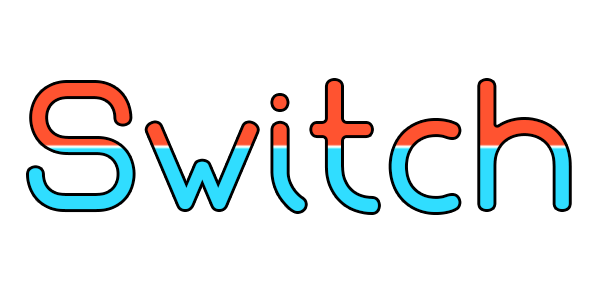
<style>
.page{position:relative;width:600px;height:300px;background:#ffffff}
.page>*{position:absolute;margin:0}
.t1{font:158.8px "Lachata"}
</style>
<div class="page">
<p class="t1" style="left:29px;top:81px;width:540px;height:131px">Switch</p>
</div>
